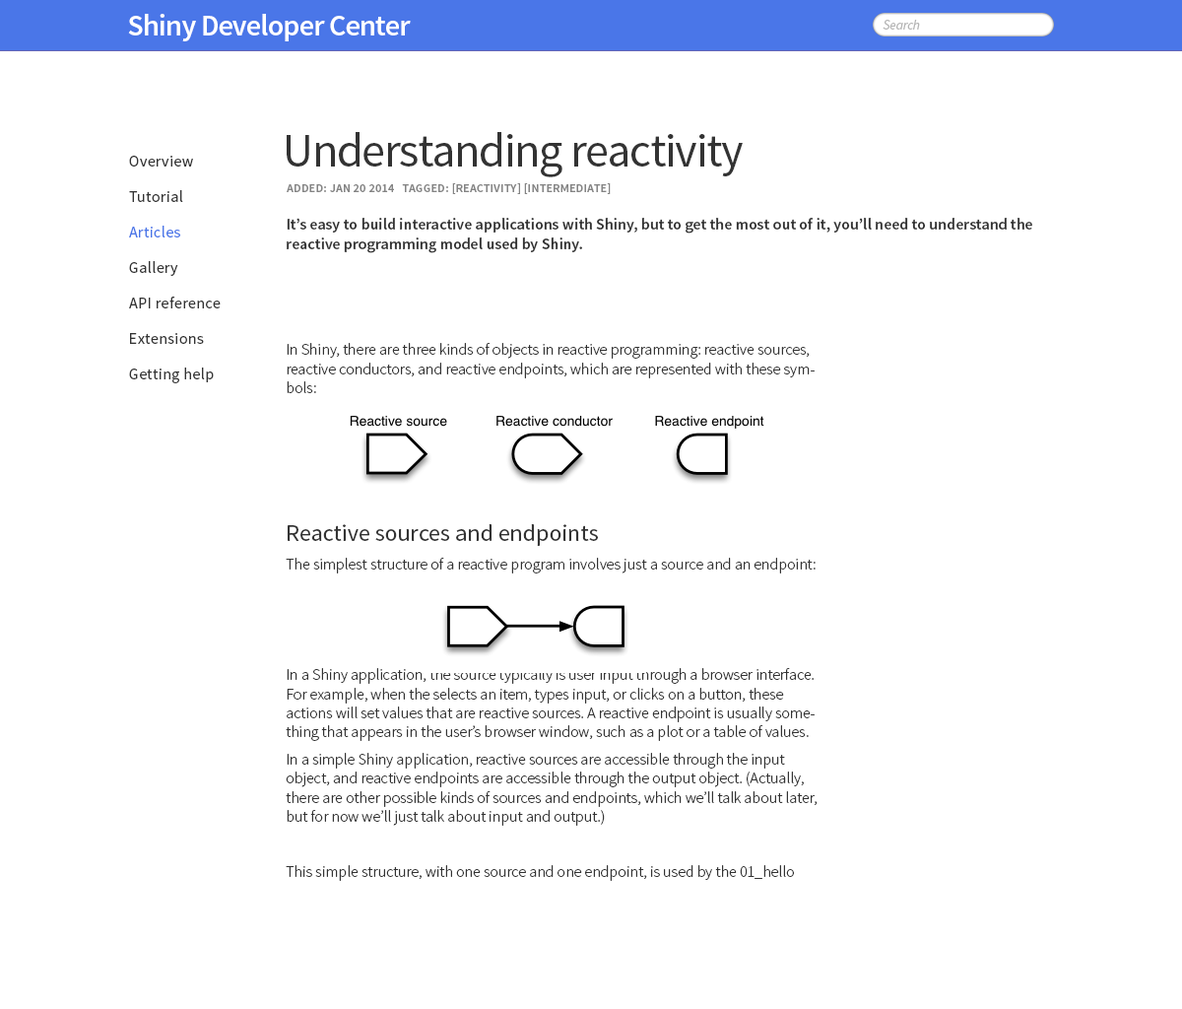
<style>
.page{position:relative;width:1182px;height:1009px;background:#ffffff}
.page>*{position:absolute;margin:0}
.t1{font:29.6px "SourceSansPro-Semibold";letter-spacing:-0.025em;color:#ffffff}
.t2{font:13.8px "SourceSansPro-It";letter-spacing:-0.025em;color:#b4b4b4}
.t3{font:47.3px "SourceSansPro-Regular";letter-spacing:-0.025em;color:#333333}
.t4{font:15.8px/35.5px "SourceSansPro-Regular";letter-spacing:0.025em;color:#333333}
.t5{font:15.8px/35.5px "SourceSansPro-Regular";letter-spacing:0.025em;color:#4a76e8}
.t6{font:11.8px "SourceSansPro-Semibold";letter-spacing:0.025em;color:#848484;text-transform:uppercase}
.t7{font:15.8px "SourceSansPro-Semibold";color:#333333}
.t8{font:15.8px "SourceSansPro-Light";color:#333333}
.t9{font:23.6px "SourceSansPro-Regular";color:#333333}
</style>
<div class="page">
<p class="t1" style="left:128px;top:14px;width:283px;height:27px">Shiny Developer Center</p>
<p class="t2" style="left:883px;top:20px;width:37px;height:10px">Search</p>
<p class="t3" style="left:287px;top:132px;width:456px;height:45px">Understanding reactivity</p>
<p class="t4" style="left:129px;top:156px;width:92px;height:227px">Overview<br>Tutorial<br><span class="t5">Articles<br></span>Gallery<br>API reference<br>Extensions<br>Getting help</p>
<p class="t6" style="left:287px;top:183px;width:324px;height:11px">added: jan 20 2014   tagged: [reactivity] [intermediate]</p>
<p class="t7" style="left:287px;top:218px;width:745px;height:35px">It’s easy to build interactive applications with Shiny, but to get the most out of it, you’ll need to understand the reactive programming model used by Shiny.</p>
<p class="t8" style="left:286px;top:343px;width:532px;height:538px">In Shiny, there are three kinds of objects in reactive programming: reactive sources, reactive conductors, and reactive endpoints, which are represented with these symbols:<br><br><br><br><br><span class="t9">Reactive sources and endpoints<br></span>The simplest structure of a reactive program involves just a source and an endpoint:<br><br><br><br>In a Shiny application, the source typically is user input through a browser interface. For example, when the selects an item, types input, or clicks on a button, these actions will set values that are reactive sources. A reactive endpoint is usually something that appears in the user’s browser window, such as a plot or a table of values.<br>In a simple Shiny application, reactive sources are accessible through the input object, and reactive endpoints are accessible through the output object. (Actually, there are other possible kinds of sources and endpoints, which we’ll talk about later, but for now we’ll just talk about input and output.)<br><br>This simple structure, with one source and one endpoint, is used by the 01_hello example. The server.R code for that example looks something like this:</p>
</div>
